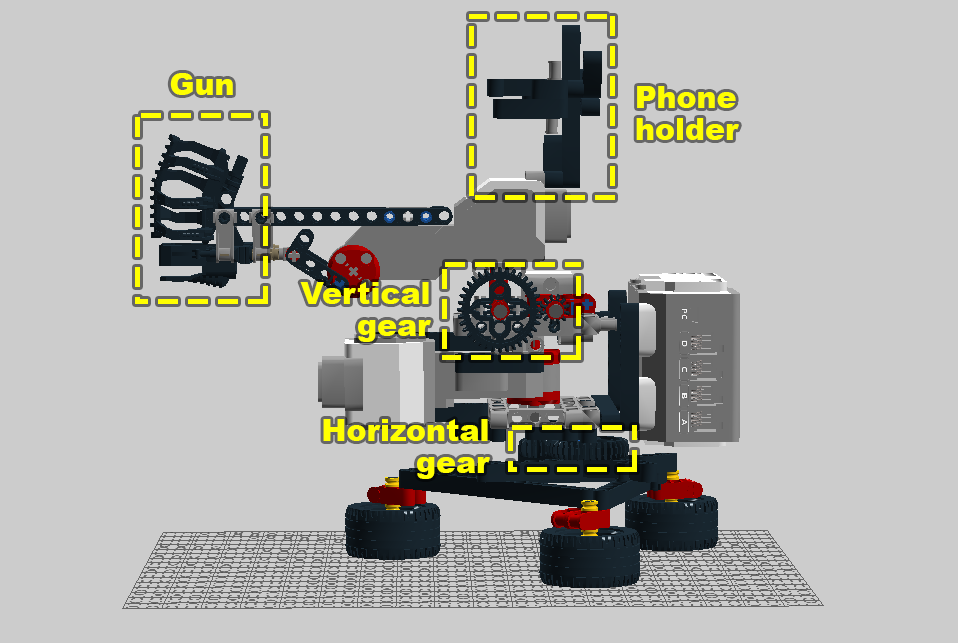
<style>
.page{position:relative;width:958px;height:643px;background:#cccccc}
.page>*{position:absolute;margin:0}
.t1{font:30px "Arial-Black";color:#ffff00}
.t2{font:30px/32px "Arial-Black";color:#ffff00}
</style>
<div class="page">
<p class="t1" style="left:170px;top:73px;width:63px;height:22px">Gun</p>
<p class="t2" style="left:636px;top:86px;width:103px;height:54px">Phone <br>holder</p>
<p class="t2" style="left:300px;top:282px;width:131px;height:60px;text-align:right">Vertical<br>gear</p>
<p class="t2" style="left:323px;top:419px;width:167px;height:60px;text-align:right">Horizontal<br>gear</p>
</div>
